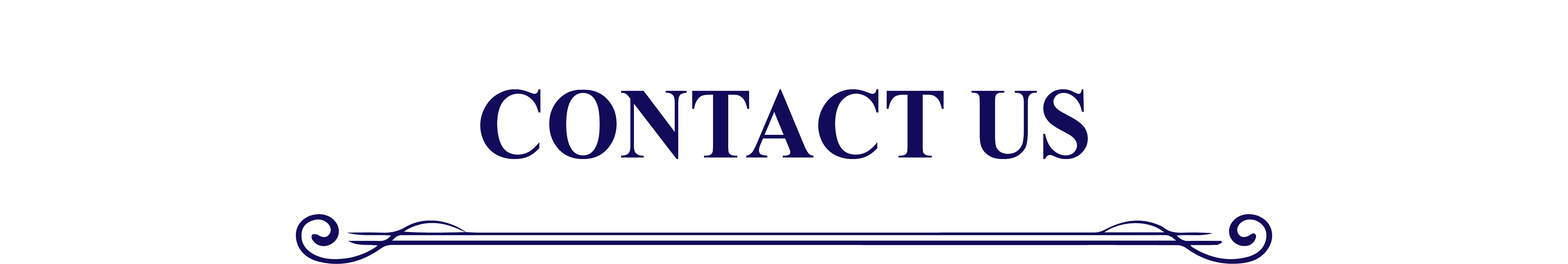
<style>
.page{position:relative;width:1568px;height:264px;background:#ffffff}
.page>*{position:absolute;margin:0}
.t1{font:101.1px "TimesNewRomanPS-BoldMT";color:#110b5a;scale:0.95 1}
</style>
<div class="page">
<p class="t1" style="left:480px;top:89px;width:608px;height:70px">CONTACT US</p>
</div>
